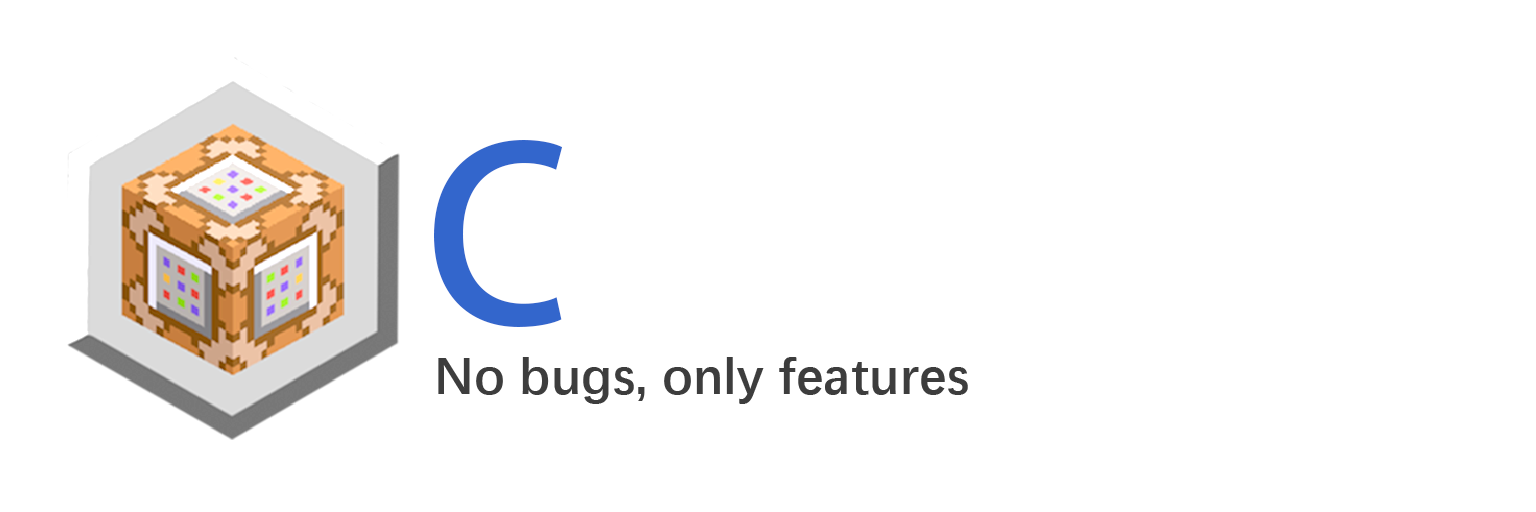
<style>
.page{position:relative;width:1536px;height:512px;background:#ffffff}
.page>*{position:absolute;margin:0}
.t1{font:237.5px "AdobeHeitiStd-Regular";color:#3366cc}
.t2{font:52.1px "DengXian-Bold";color:#3d3d3d}
</style>
<div class="page">
<p class="t1" style="left:434px;top:140px;width:129px;height:187px">C</p>
<p class="t2" style="left:438px;top:357px;width:530px;height:47px">No bugs, only features</p>
</div>
